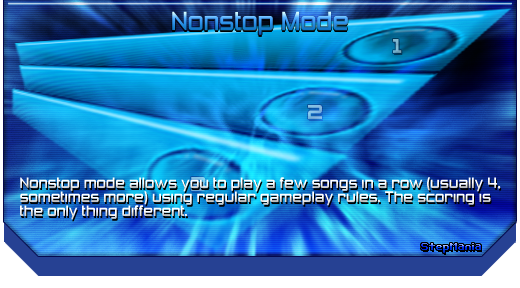
<style>
.page{position:relative;width:520px;height:288px}
.page>*{position:absolute;margin:0}
.t1{font:24px "ZeroThrees"}
.t2{font:24px "Zeroes";color:#7eb4cd}
.t3{font:24px "Zeroes";color:#84bbe2}
.t4{font:14px "ZeroThrees";color:#ffffff}
.t5{font:10px "Bit-Darling10-(sRB)"}
</style>
<div class="page">
<p class="t1" style="left:172px;top:11px;width:176px;height:24px">Nonstop Mode</p>
<p class="t2" style="left:393px;top:39px;width:9px;height:14px">1</p>
<p class="t3" style="left:308px;top:105px;width:14px;height:14px">2</p>
<p class="t4" style="left:20px;top:177px;width:481px;height:43px">Nonstop mode allows you to play a few songs in a row (usually 4,<br>sometimes more) using regular gameplay rules. The scoring is<br>the only thing different.</p>
<p class="t5" style="left:421px;top:243px;width:60px;height:10px">StepMania</p>
</div>
